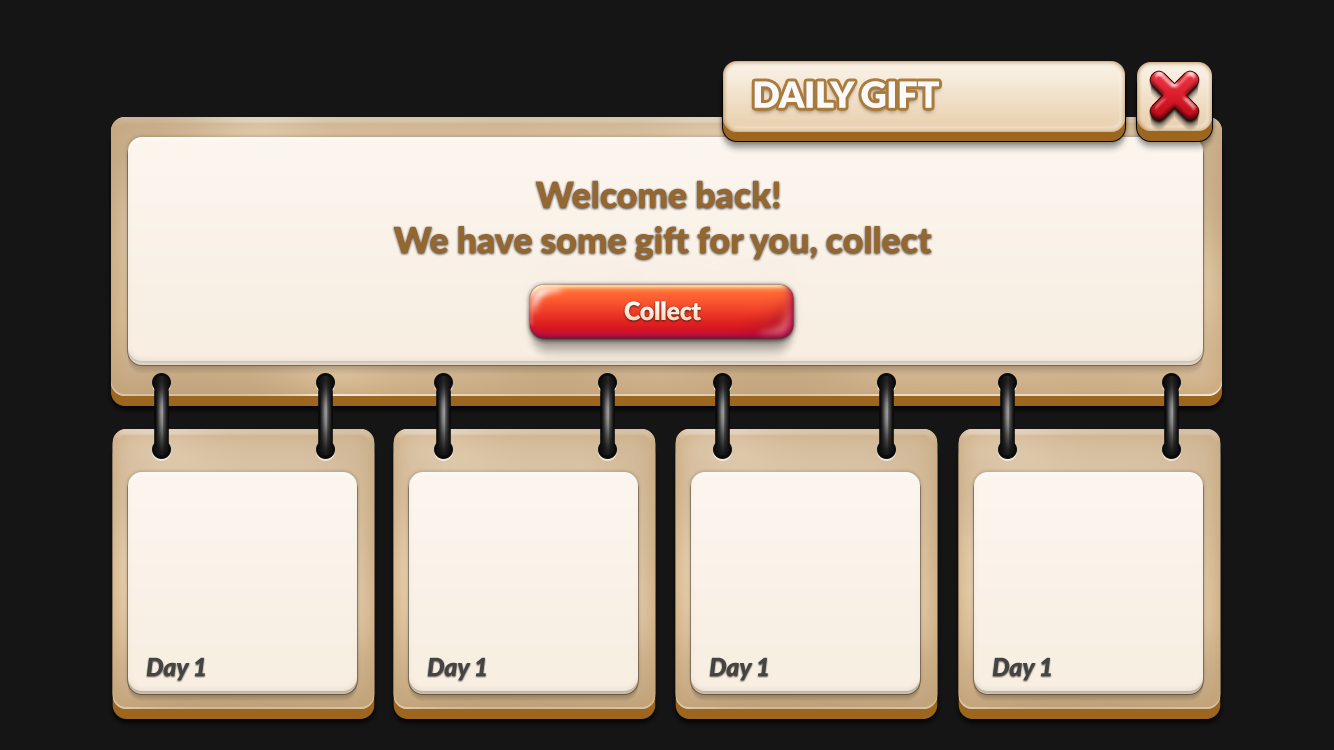
<style>
.page{position:relative;width:1334px;height:750px;background:#161515}
.page>*{position:absolute;margin:0}
.t1{font:36.2px "Lato-Black";letter-spacing:-0.01em;color:#fbfafa}
.t2{font:36.2px/45.3px "Lato-Black";letter-spacing:-0.01em;color:#8d5d1c}
.t3{font:24.9px "Lato-Black";letter-spacing:-0.01em}
.t4{font:24.9px "Lato-BlackItalic";letter-spacing:-0.01em;color:#454443}
</style>
<div class="page">
<p class="t1" style="left:754px;top:81px;width:185px;height:27px">DAILY GIFT</p>
<p class="t2" style="left:393px;top:180px;width:539px;height:80px;text-align:center;opacity:0.95">Welcome back! <br>We have some gift for you, collect</p>
<p class="t3" style="left:624px;top:301px;width:77px;height:20px">Collect</p>
<p class="t4" style="left:146px;top:657px;width:59px;height:24px">Day 1</p>
<p class="t4" style="left:427px;top:657px;width:59px;height:24px">Day 1</p>
<p class="t4" style="left:709px;top:657px;width:59px;height:24px">Day 1</p>
<p class="t4" style="left:992px;top:657px;width:59px;height:24px">Day 1</p>
</div>
